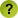
<style>
.page{position:relative;width:18px;height:18px}
.page>*{position:absolute;margin:0}
.t1{font:14px "Arial-BoldMT";letter-spacing:-0.05em;color:#000000}
</style>
<div class="page">
<p class="t1" style="left:5px;top:3px;width:8px;height:11px">?</p>
</div>
